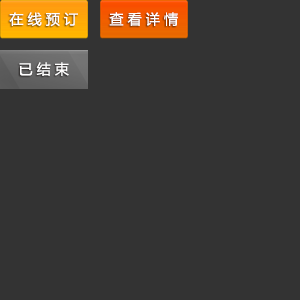
<style>
.page{position:relative;width:300px;height:300px;background:#333333}
.page>*{position:absolute;margin:0}
.t1{font:14px "MicrosoftYaHei";letter-spacing:0.3em;color:#ffffff}
</style>
<div class="page">
<p class="t1" style="left:9px;top:12px;width:69px;height:15px">在线预订</p>
<p class="t1" style="left:109px;top:12px;width:69px;height:14px">查看详情</p>
<p class="t1" style="left:19px;top:62px;width:50px;height:14px">已结束</p>
</div>
